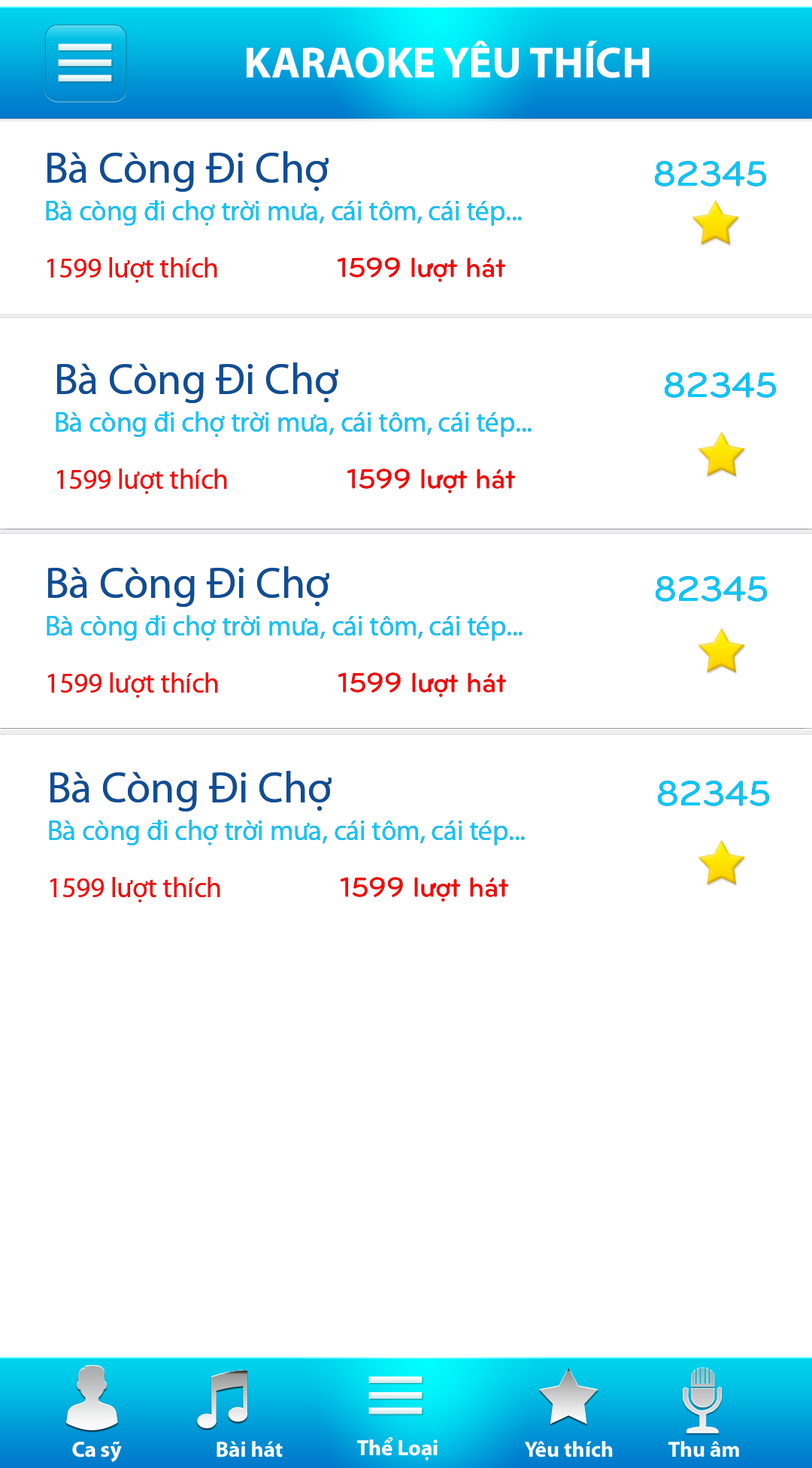
<style>
.page{position:relative;width:812px;height:1468px;background:#ffffff}
.page>*{position:absolute;margin:0}
.t1{font:43.9px "MyriadPro-Bold";color:#ffffff}
.t2{font:43.9px "MyriadPro-Regular";color:#0e4e96}
.t3{font:43.9px "MyriadPro-Regular";letter-spacing:-0.005em;color:#0e4e96}
.t4{font:36.3px "UTMBryantLGBold";letter-spacing:-0.005em;color:#00c8ff}
.t5{font:28.2px "MyriadPro-Regular";letter-spacing:-0.005em;color:#00c8ff}
.t6{font:28.2px "MyriadPro-Regular";letter-spacing:-0.005em;color:#ff0100}
.t7{font:28.2px "UTMBryantLGBold";letter-spacing:-0.005em;color:#ff0000}
.t8{font:21.9px "MyriadPro-Bold";color:#ffffff}
</style>
<div class="page">
<p class="t1" style="left:247px;top:41px;width:403px;height:37px">KARAOKE YÊU THÍCH</p>
<p class="t2" style="left:47px;top:151px;width:282px;height:41px"><span class="t3">B</span>à Còng Đi Chợ</p>
<p class="t4" style="left:655px;top:161px;width:111px;height:26px">82345</p>
<p class="t5" style="left:46px;top:200px;width:476px;height:26px">Bà còng đi chợ trời mưa, cái tôm, cái tép...</p>
<p class="t6" style="left:47px;top:257px;width:170px;height:26px">1599 lượt thích</p>
<p class="t7" style="left:338px;top:257px;width:167px;height:25px">1599 lượt hát</p>
<p class="t2" style="left:57px;top:363px;width:281px;height:40px"><span class="t3">B</span>à Còng Đi Chợ</p>
<p class="t4" style="left:665px;top:372px;width:111px;height:26px">82345</p>
<p class="t5" style="left:56px;top:411px;width:476px;height:26px">Bà còng đi chợ trời mưa, cái tôm, cái tép...</p>
<p class="t6" style="left:56px;top:469px;width:171px;height:25px">1599 lượt thích</p>
<p class="t7" style="left:347px;top:469px;width:168px;height:24px">1599 lượt hát</p>
<p class="t2" style="left:48px;top:566px;width:281px;height:41px"><span class="t3">B</span>à Còng Đi Chợ</p>
<p class="t4" style="left:656px;top:576px;width:111px;height:26px">82345</p>
<p class="t5" style="left:47px;top:615px;width:476px;height:26px">Bà còng đi chợ trời mưa, cái tôm, cái tép...</p>
<p class="t6" style="left:47px;top:672px;width:171px;height:26px">1599 lượt thích</p>
<p class="t7" style="left:338px;top:672px;width:168px;height:25px">1599 lượt hát</p>
<p class="t2" style="left:50px;top:771px;width:282px;height:40px"><span class="t3">B</span>à Còng Đi Chợ</p>
<p class="t4" style="left:658px;top:781px;width:111px;height:25px">82345</p>
<p class="t5" style="left:49px;top:820px;width:476px;height:25px">Bà còng đi chợ trời mưa, cái tôm, cái tép...</p>
<p class="t6" style="left:50px;top:877px;width:170px;height:25px">1599 lượt thích</p>
<p class="t7" style="left:341px;top:877px;width:167px;height:25px">1599 lượt hát</p>
<p class="t8" style="left:72px;top:1441px;width:50px;height:21px">Ca sỹ</p>
<p class="t8" style="left:217px;top:1441px;width:66px;height:17px">Bài hát</p>
<p class="t8" style="left:357px;top:1437px;width:81px;height:24px">Thể Loại</p>
<p class="t8" style="left:524px;top:1441px;width:89px;height:17px">Yêu thích</p>
<p class="t8" style="left:669px;top:1441px;width:70px;height:17px">Thu âm</p>
</div>
